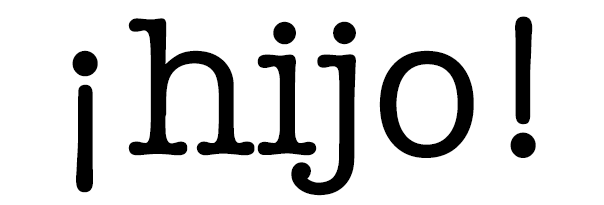
<style>
.page{position:relative;width:604px;height:205px;background:#ffffff}
.page>*{position:absolute;margin:0}
.t1{font:200px "AmericanTypewriter";color:#000000}
</style>
<div class="page">
<p class="t1" style="left:72px;top:16px;width:464px;height:180px">¡hijo!</p>
</div>
